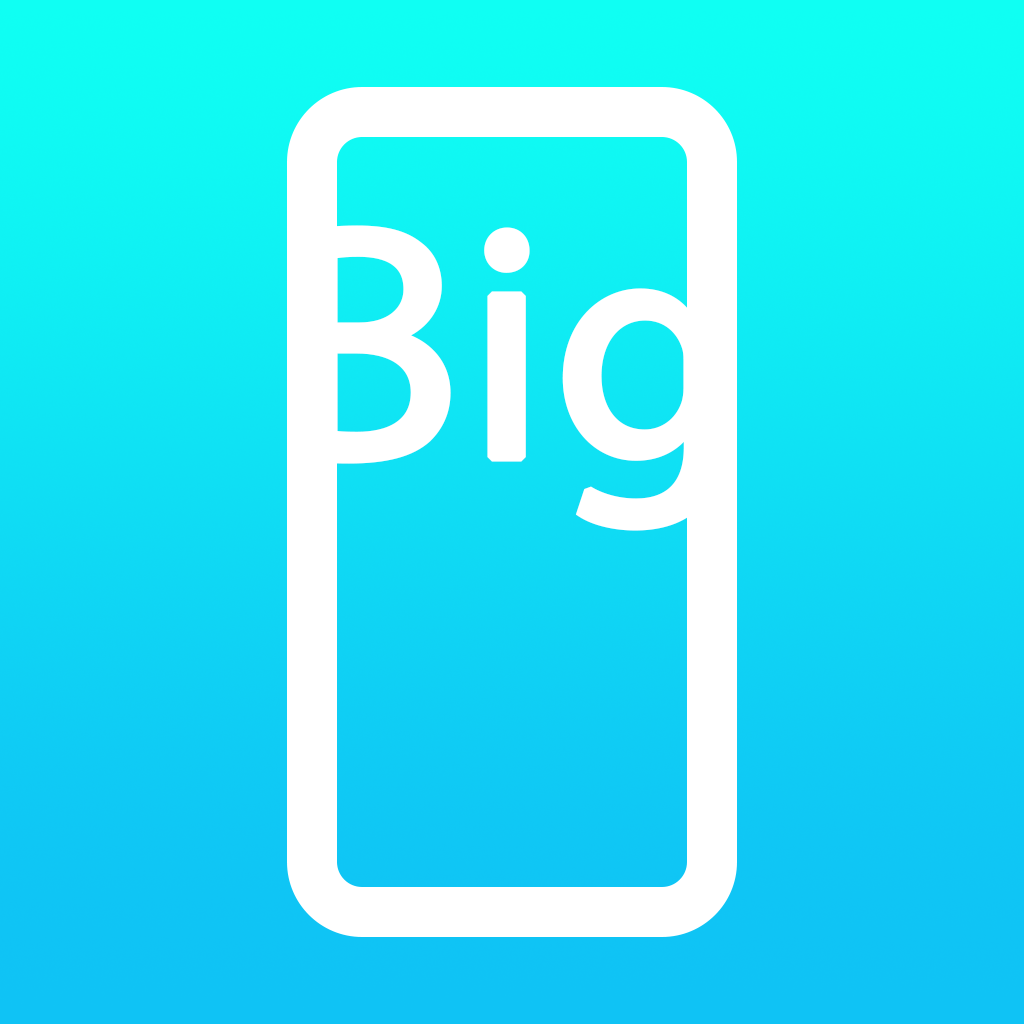
<style>
.page{position:relative;width:1024px;height:1024px}
.page>*{position:absolute;margin:0}
.t1{font:333.3px "MyriadPro-Regular";color:#ffffff;font-weight:bold}
</style>
<div class="page">
<p class="t1" style="left:299px;top:225px;width:424px;height:306px">Big</p>
</div>
